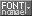
<style>
.page{position:relative;width:32px;height:16px;background:#666666}
.page>*{position:absolute;margin:0}
.t1{font:8px/6px "MarkeEigenbauNormal";color:#ffffff}
.t2{font:8px/6px "MarkeEigenbauNormal";color:#cccccc}
</style>
<div class="page">
<p class="t1" style="left:2px;top:2px;width:22px;height:13px">FONT<br>  <span class="t2">size</span></p>
<p class="t1" style="left:2px;top:2px;width:22px;height:13px;text-align:center">FONT<br><span class="t2">name</span></p>
</div>
